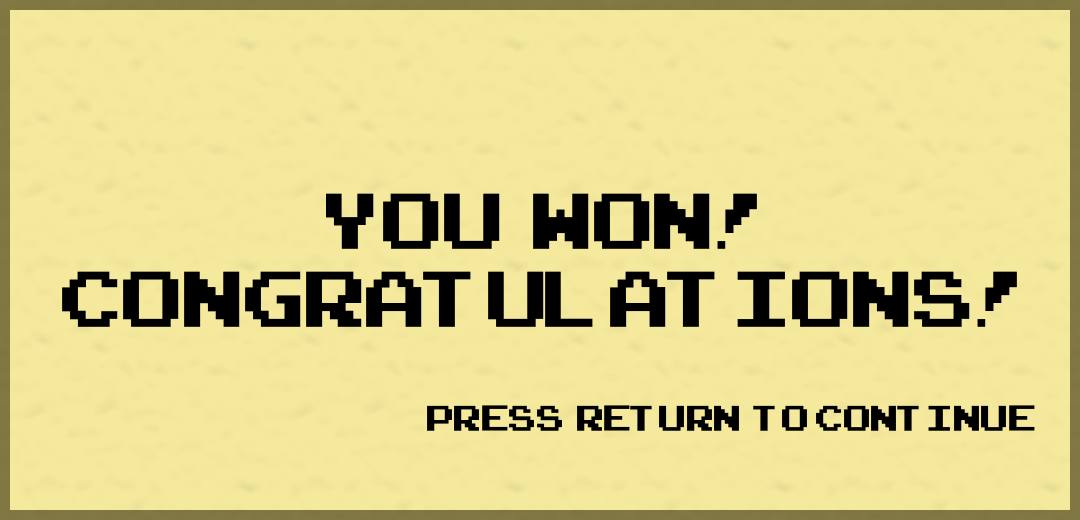
<style>
.page{position:relative;width:1080px;height:520px;background:#f5e99d}
.page>*{position:absolute;margin:0}
.t1{font:110.7px/77.8px "ArcadeClassic";color:#000000}
.t2{font:50px "ArcadeClassic";color:#000000}
</style>
<div class="page">
<p class="t1" style="left:62px;top:193px;width:955px;height:134px;text-align:center">you  won!<br>Congratulations!</p>
<p class="t2" style="left:427px;top:405px;width:608px;height:26px">press  return  to continue</p>
</div>
